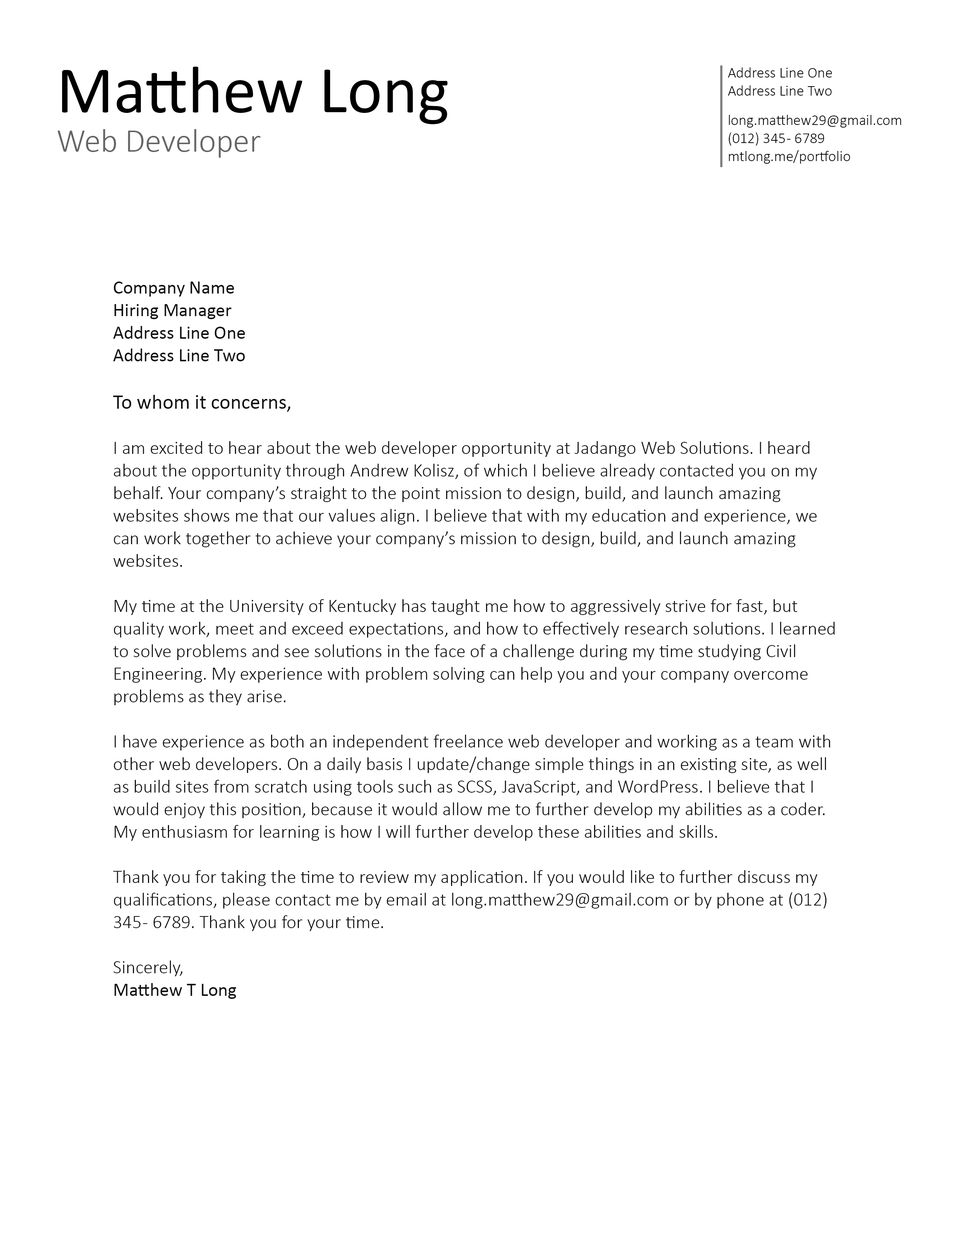
<style>
.page{position:relative;width:960px;height:1242px;background:#ffffff}
.page>*{position:absolute;margin:0}
.t1{font:32.9px "Calibri-Light";color:#656565}
.t2{font:67px "Calibri";color:#000000}
.t3{font:15.1px "Calibri-Light";color:#000000}
.t4{font:18.8px "Calibri-Light";color:#111111}
.t5{font:18.8px "Calibri";color:#111111}
.t6{font:20.7px "Calibri";color:#111111}
</style>
<div class="page">
<p class="t1" style="left:58px;top:67px;width:390px;height:91px"><span class="t2">Matthew Long<br></span>Web Developer</p>
<p class="t3" style="left:728px;top:67px;width:173px;height:97px">Address Line One<br>Address Line Two<br><br>long.matthew29@gmail.com<br>(012) 345 - 6789<br>mtlong.me/portfolio</p>
<p class="t4" style="left:113px;top:282px;width:722px;height:717px"><span class="t5">Company Name<br>Hiring Manager<br>Address Line One<br>Address Line Two<br><br></span><span class="t6">To whom it concerns,<br></span><br>I am excited to hear about the web developer opportunity at Jadango Web Solutions. I heard about the opportunity through Andrew Kolisz, of which I believe already contacted you on my behalf. Your company’s straight to the point mission to design, build, and launch amazing websites shows me that our values align. I believe that with my education and experience, we can work together to achieve your company’s mission to design, build, and launch amazing websites.<br><br>My time at the University of Kentucky has taught me how to aggressively strive for fast, but quality work, meet and exceed expectations, and how to effectively research solutions. I learned to solve problems and see solutions in the face of a challenge during my time studying Civil Engineering. My experience with problem solving can help you and your company overcome problems as they arise.<br><br>I have experience as both an independent freelance web developer and working as a team with other web developers. On a daily basis I update/change simple things in an existing site, as well as build sites from scratch using tools such as SCSS, JavaScript, and WordPress. I believe that I would enjoy this position, because it would allow me to further develop my abilities as a coder. My enthusiasm for learning is how I will further develop these abilities and skills.<br><br>Thank you for taking the time to review my application. If you would like to further discuss my qualifications, please contact me by email at long.matthew29@gmail.com or by phone at (012) 345 - 6789. Thank you for your time.<br><br>Sincerely,<br><span class="t5">Matthew T Long</span></p>
</div>
